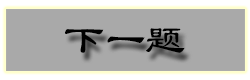
<style>
.page{position:relative;width:250px;height:80px;background:#a9a9a9}
.page>*{position:absolute;margin:0}
.t1{font:41.3px "LiSu";color:#000000}
</style>
<div class="page">
<p class="t1" style="left:65px;top:28px;width:120px;height:25px">下一题</p>
</div>
